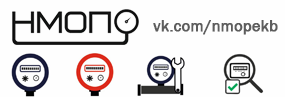
<style>
.page{position:relative;width:285px;height:97px;background:#fefefe}
.page>*{position:absolute;margin:0}
.t1{font:16px "FranklinGothic-Book";color:#5d5d5d;font-weight:bold}
</style>
<div class="page">
<p class="t1" style="left:153px;top:20px;width:125px;height:15px">vk.com/nmopekb</p>
</div>
